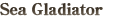
<style>
.page{position:relative;width:123px;height:16px;background:#ffffff}
.page>*{position:absolute;margin:0}
.t1{font:16px "RyuminPro-ExBold";letter-spacing:-0.04em;color:#4a3f32;font-weight:bold}
</style>
<div class="page">
<p class="t1" style="left:0px;top:2px;width:103px;height:14px">Sea Gladiator</p>
</div>
